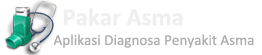
<style>
.page{position:relative;width:262px;height:55px;background:#ffffff}
.page>*{position:absolute;margin:0}
.t1{font:24.8px "Calibri-Bold";color:#efefef}
.t2{font:15.1px "Calibri";color:#aeadad}
</style>
<div class="page">
<p class="t1" style="left:64px;top:8px;width:119px;height:18px">Pakar Asma</p>
<p class="t2" style="left:53px;top:34px;width:201px;height:14px">Aplikasi Diagnosa Penyakit Asma</p>
</div>
